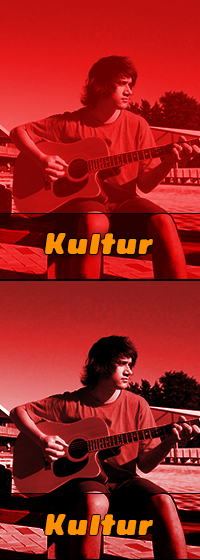
<style>
.page{position:relative;width:200px;height:560px}
.page>*{position:absolute;margin:0}
.t1{font:30px "ReelerPersonalUseOnly";color:#ff9000}
</style>
<div class="page">
<p class="t1" style="left:45px;top:233px;width:108px;height:21px">Kultur</p>
<p class="t1" style="left:45px;top:514px;width:108px;height:21px">Kultur</p>
</div>
